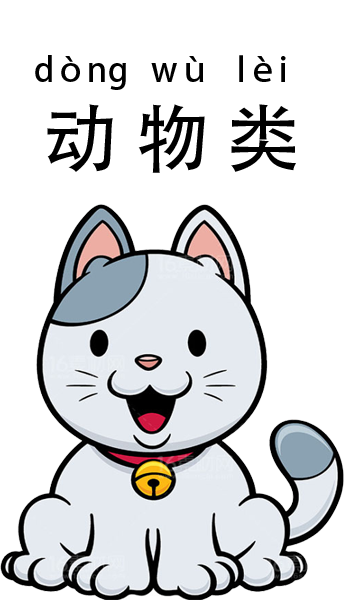
<style>
.page{position:relative;width:344px;height:600px;background:#ffffff}
.page>*{position:absolute;margin:0}
.t1{font:33.3px "AdobeHeitiStd-Regular";color:#000000}
.t2{font:75px "AdobeHeitiStd-Regular";color:#000000}
</style>
<div class="page">
<p class="t1" style="left:35px;top:55px;width:91px;height:35px">dòng</p>
<p class="t1" style="left:151px;top:56px;width:53px;height:26px">wù</p>
<p class="t1" style="left:239px;top:55px;width:47px;height:27px">lèi</p>
<p class="t2" style="left:47px;top:104px;width:249px;height:69px">动 物 类</p>
</div>
